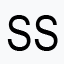
<style>
.page{position:relative;width:64px;height:64px;background:#f8f9fa}
.page>*{position:absolute;margin:0}
.t1{font:46.5px "ArialMT";letter-spacing:0.01em;color:#000000;scale:0.86 1}
</style>
<div class="page">
<p class="t1" style="left:7px;top:15px;width:51px;height:36px">SS</p>
</div>
